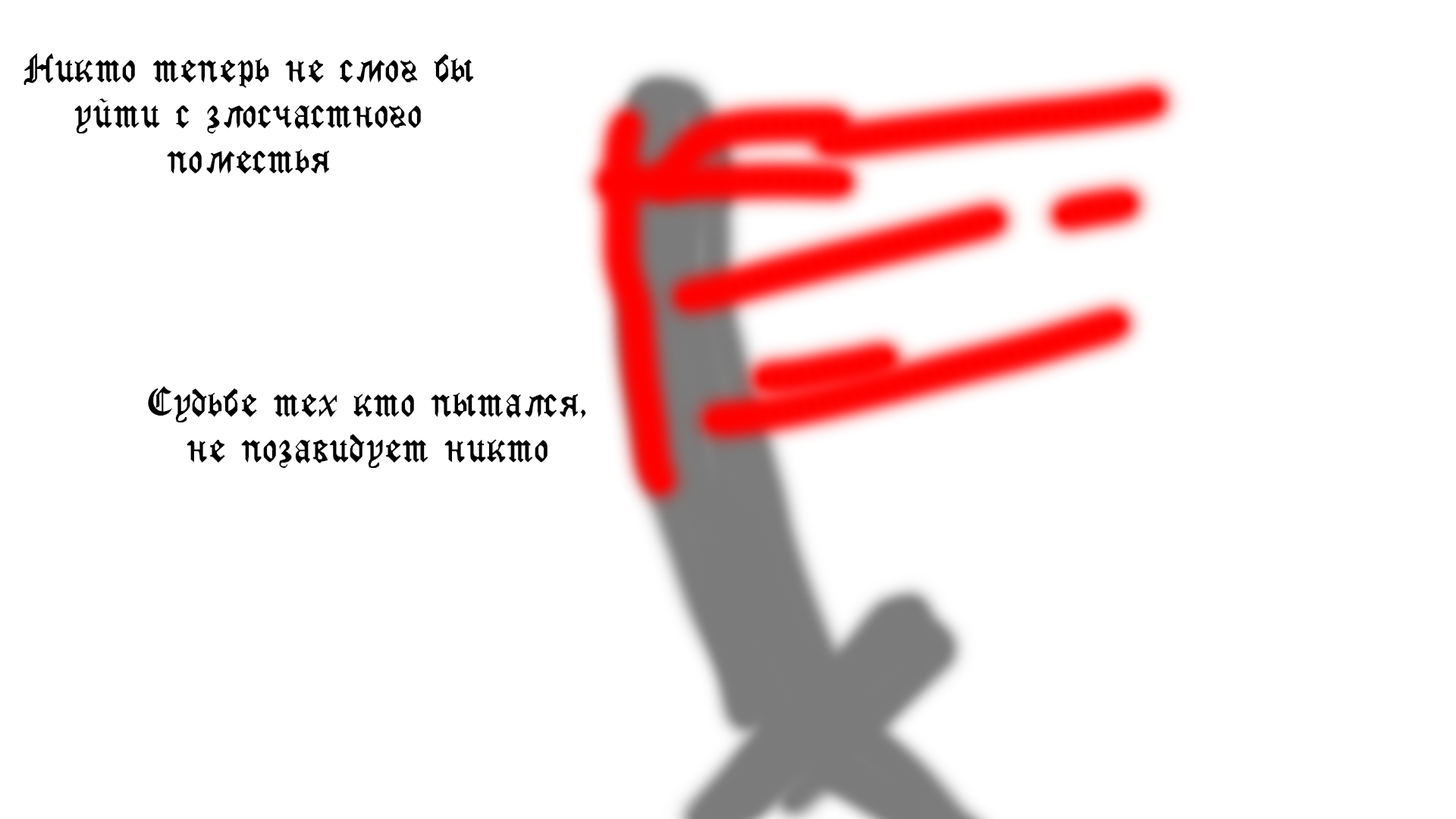
<style>
.page{position:relative;width:1456px;height:819px;background:#ffffff}
.page>*{position:absolute;margin:0}
.t1{font:9.1px "GothicRusMedium";color:#000000}
</style>
<div class="page">
<p class="t1" style="left:24px;top:53px;width:450px;height:121px;text-align:center">Никто теперь не смог бы<br>уйти с злосчастного<br>поместья</p>
<p class="t1" style="left:148px;top:386px;width:438px;height:82px;text-align:center">Судьбе тех кто пытался,<br>не позавидует никто</p>
</div>
